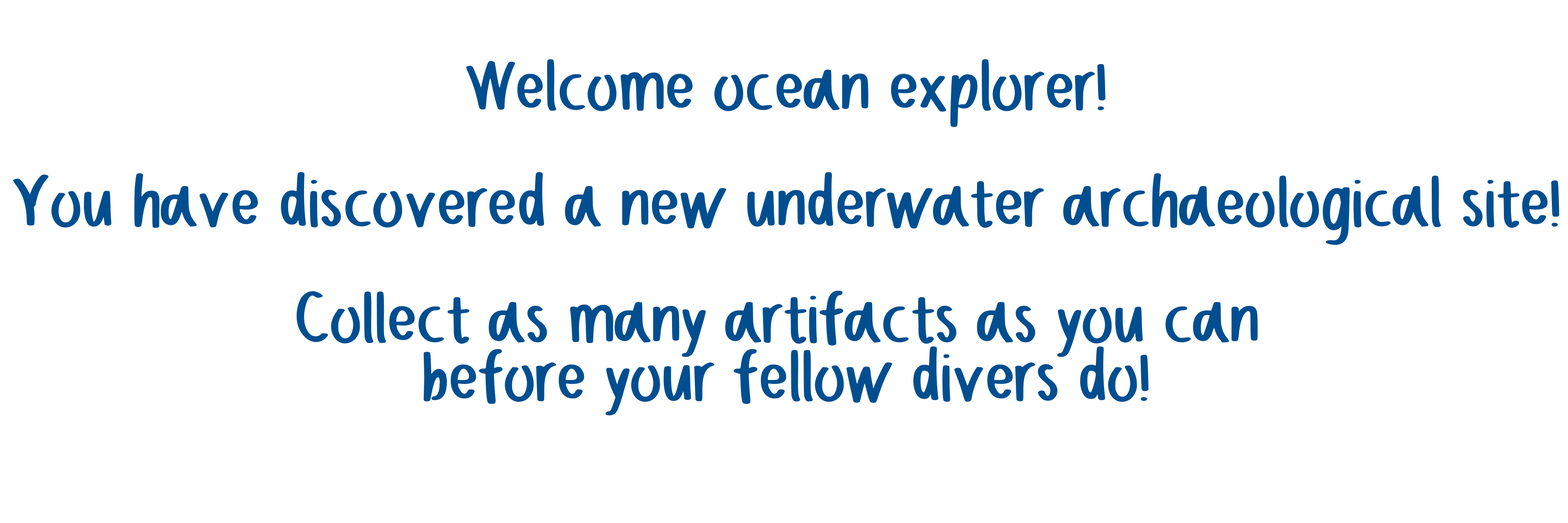
<style>
.page{position:relative;width:1568px;height:523px;background:#ffffff}
.page>*{position:absolute;margin:0}
.t1{font:99.3px/58.1px "JustForFun-Regular";color:#004e90;scale:0.79 1}
.t2{font:99.3px/21.8px "JustForFun-Regular";color:#004e90;scale:0.79 1}
</style>
<div class="page">
<p class="t1" style="left:13px;top:59px;width:1546px;height:356px;text-align:center"><span class="t2">Welcome ocean explorer!<br></span><br>You have discovered a new underwater archaeological site!<br><br>Collect as many artifacts as you can <br>before your fellow divers do!</p>
</div>
